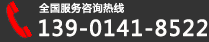
<style>
.page{position:relative;width:209px;height:42px;background:#333333}
.page>*{position:absolute;margin:0}
.t1{font:10px "MicrosoftYaHei";letter-spacing:0.04em;color:#fdfdfd;font-weight:bold}
.t2{font:21px "MicrosoftYaHei";letter-spacing:0.04em;color:#fefdfb;font-weight:bold}
</style>
<div class="page">
<p class="t1" style="left:39px;top:2px;width:85px;height:12px">全国服务咨询热线</p>
<p class="t2" style="left:39px;top:19px;width:169px;height:18px">139-0141-8522</p>
</div>
